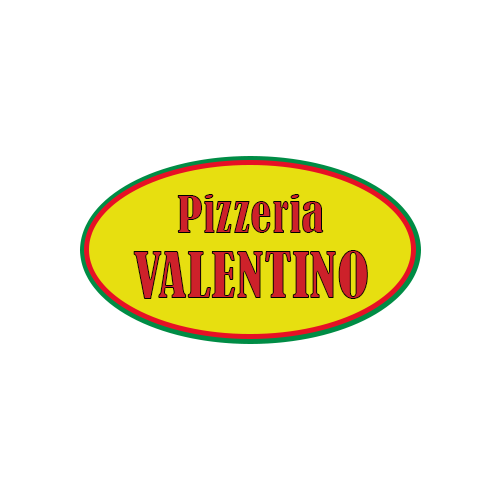
<style>
.page{position:relative;width:500px;height:500px;background:#ffffff}
.page>*{position:absolute;margin:0}
.t1{font:48px "BernardMT-Condensed";color:#cd212a}
.t2{font:60px "BernardMT-Condensed";color:#cd212a}
</style>
<div class="page">
<p class="t1" style="left:177px;top:194px;width:147px;height:39px">Pizzeria</p>
<p class="t2" style="left:133px;top:250px;width:235px;height:49px">VALENTINO</p>
</div>
